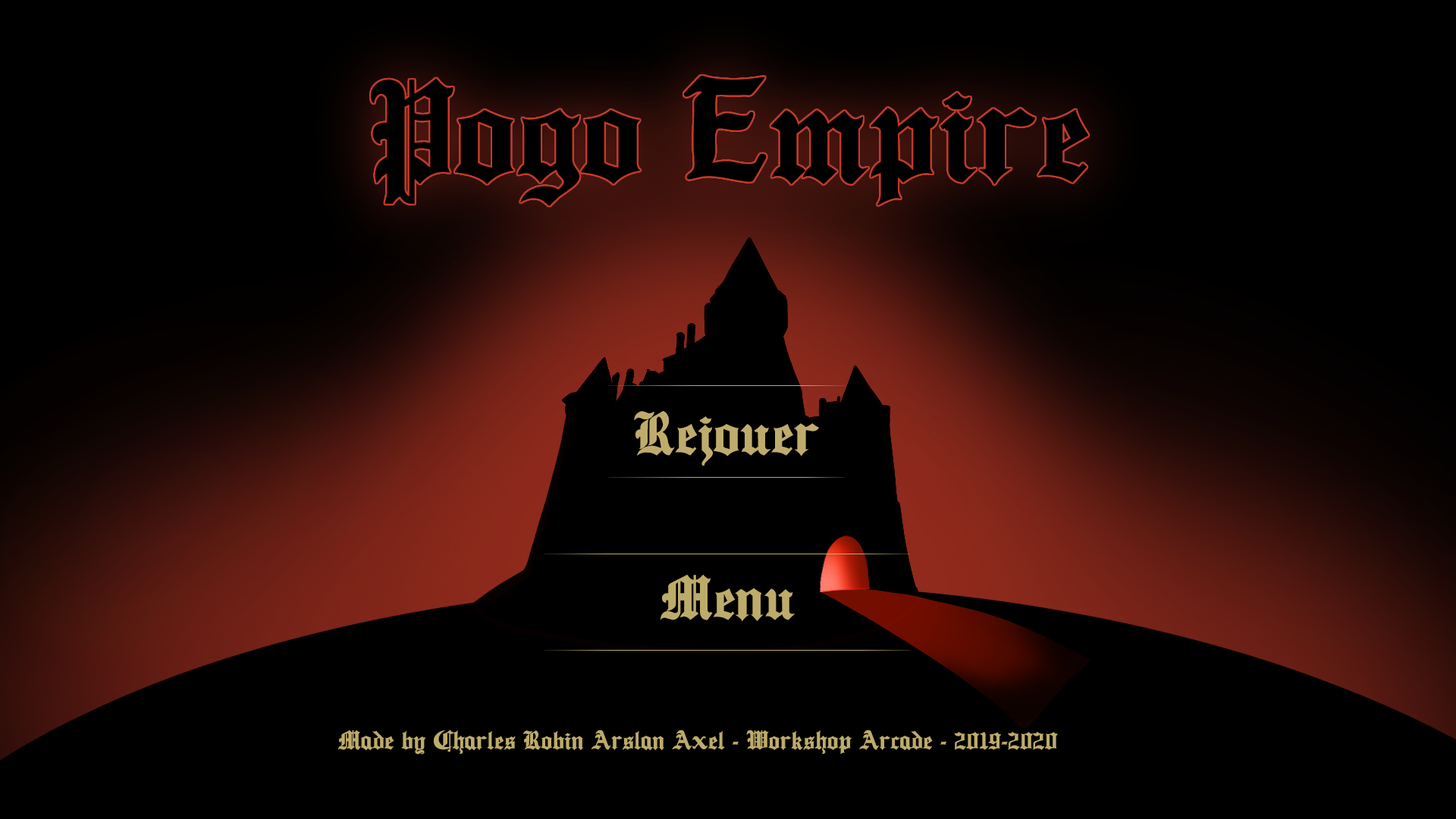
<style>
.page{position:relative;width:1456px;height:819px;background:#000000}
.page>*{position:absolute;margin:0}
.t1{font:155.4px "Ancient-Medium";color:#000000}
.t2{font:67.3px "Ancient-Medium";color:#bfac6d}
.t3{font:67.3px "Ancient-Medium";color:#bdab6a}
.t4{font:29px "Ancient-Medium";color:#bdab6a}
</style>
<div class="page">
<p class="t1" style="left:371px;top:76px;width:717px;height:130px">Pogo Empire</p>
<p class="t2" style="left:634px;top:411px;width:185px;height:55px">Rejouer</p>
<p class="t3" style="left:660px;top:574px;width:135px;height:48px">Menu</p>
<p class="t4" style="left:338px;top:730px;width:720px;height:25px">Made by Charles Robin Arslan Axel - Workshop Arcade - 2019-2020</p>
</div>
